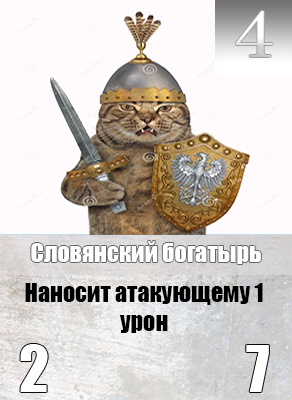
<style>
.page{position:relative;width:292px;height:400px;background:#fffbfc}
.page>*{position:absolute;margin:0}
.t1{font:65.6px "Century";color:#ffffff;scale:1.18 1}
.t2{font:24px "Impact";color:#ffffff}
.t3{font:24px "Impact";color:#000000}
</style>
<div class="page">
<p class="t1" style="left:236px;top:11px;width:37px;height:46px">4</p>
<p class="t2" style="left:31px;top:241px;width:230px;height:23px">Словянский богатырь</p>
<p class="t3" style="left:25px;top:283px;width:238px;height:50px;text-align:center">Наносит атакующему 1 урон</p>
</div>
